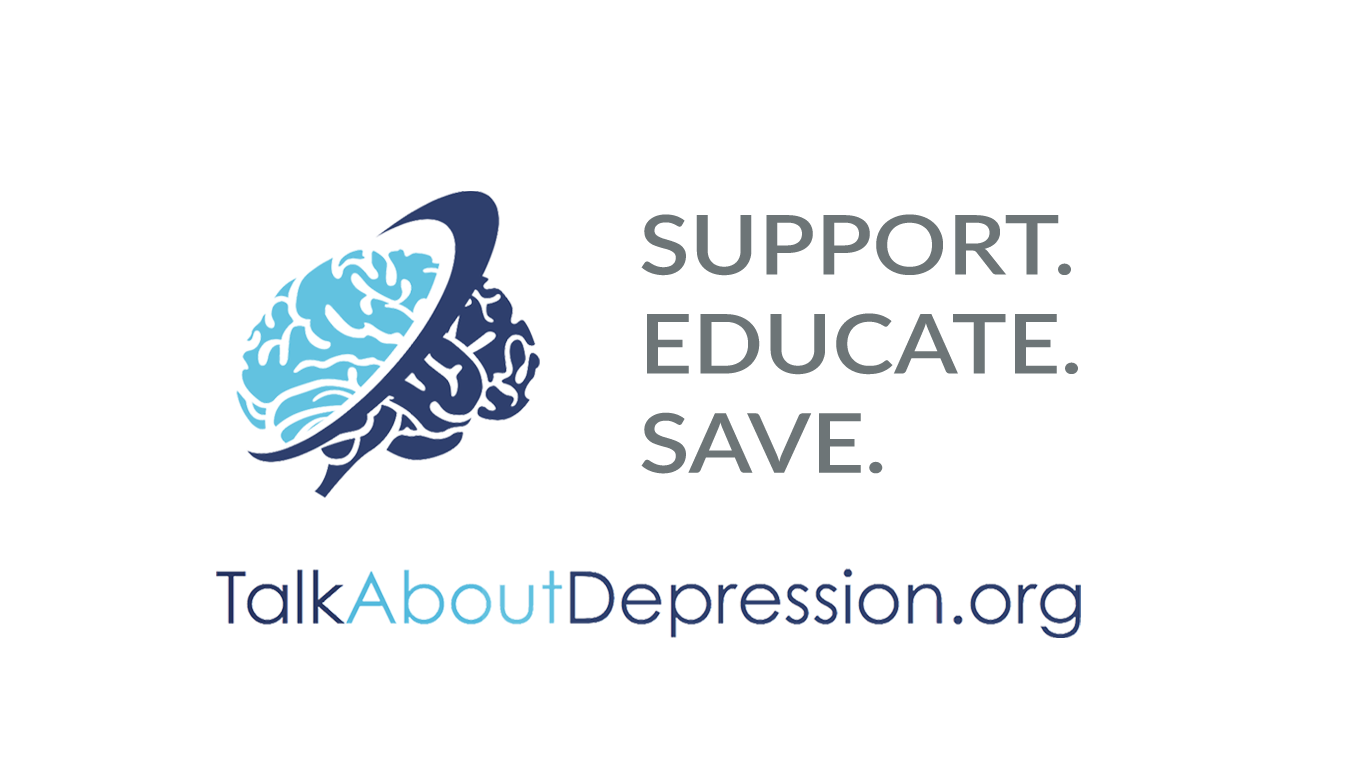
<style>
.page{position:relative;width:1366px;height:768px;background:#ffffff}
.page>*{position:absolute;margin:0}
.t1{font:82.6px "Lato-Semibold";color:#6d7577;scale:1.13 1}
</style>
<div class="page">
<p class="t1" style="left:641px;top:214px;width:437px;height:260px">SUPPORT.<br>EDUCATE.<br>SAVE.</p>
</div>
